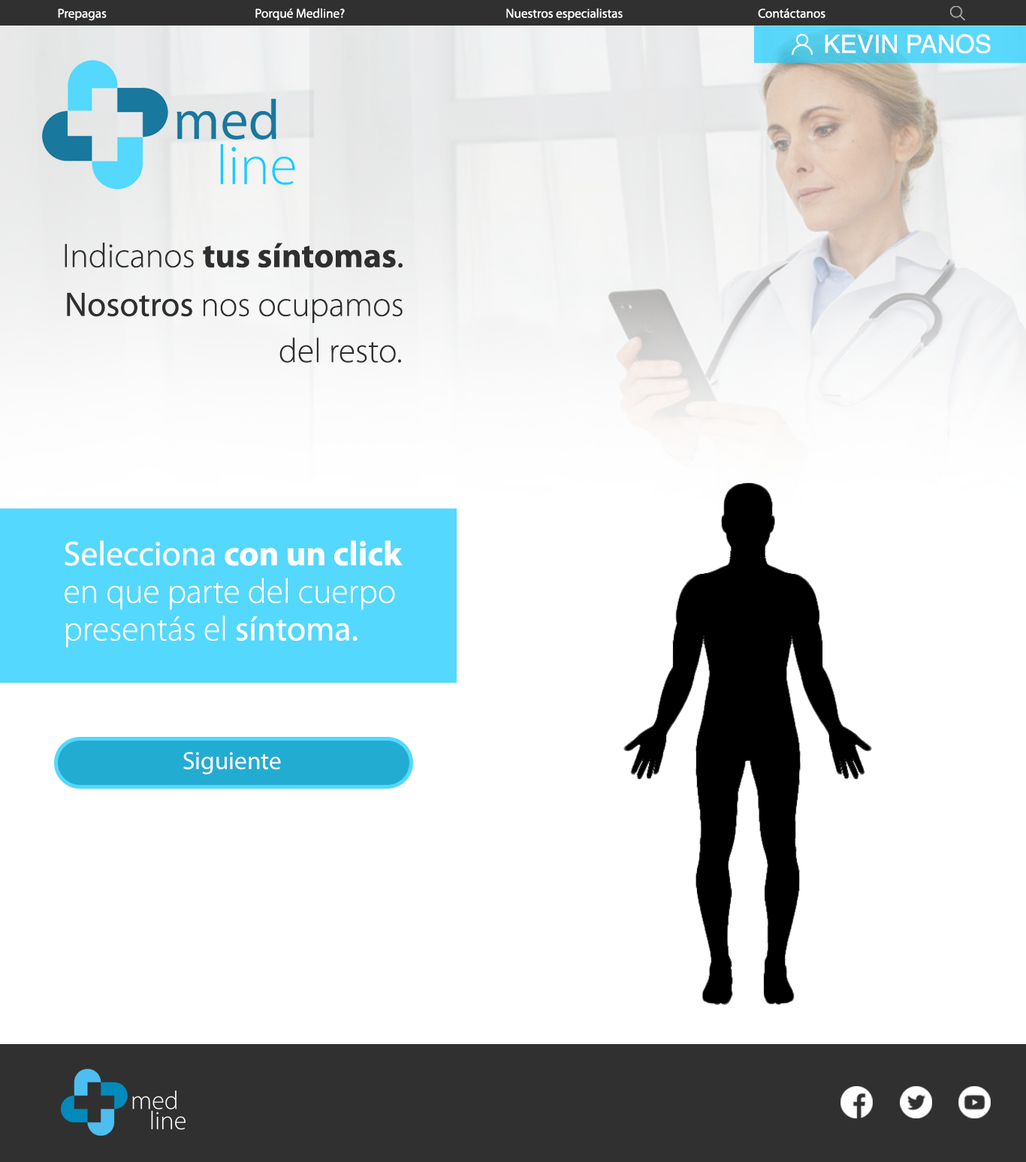
<style>
.page{position:relative;width:1026px;height:1162px;background:#ffffff}
.page>*{position:absolute;margin:0}
.t1{font:12.8px "MyriadPro-Regular";color:#ffffff}
.t2{font:25px "Helvetica";color:#ffffff}
.t3{font:34.4px "MyriadPro-Bold";color:#2f2f2f}
.t4{font:34.4px "MyriadPro-Light";color:#2f2f2f}
.t5{font:34.4px "MyriadPro-Regular";color:#2f2f2f}
.t6{font:34.4px/37.6px "MyriadPro-Light";color:#ffffff}
.t7{font:34.4px/37.6px "MyriadPro-Regular";color:#ffffff}
.t8{font:34.4px/37.6px "MyriadPro-Bold";color:#ffffff}
.t9{font:25px "MyriadPro-Regular";color:#ffffff}
</style>
<div class="page">
<p class="t1" style="left:58px;top:8px;width:49px;height:13px">Prepagas</p>
<p class="t1" style="left:255px;top:8px;width:90px;height:12px">Porqué Medline?</p>
<p class="t1" style="left:506px;top:8px;width:117px;height:12px">Nuestros especialistas</p>
<p class="t1" style="left:758px;top:8px;width:68px;height:10px">Contáctanos</p>
<p class="t2" style="left:825px;top:34px;width:166px;height:19px">KEVIN PANOS</p>
<p class="t3" style="left:65px;top:243px;width:338px;height:25px"><span class="t4">Indicanos </span>tus síntomas<span class="t5">.</span></p>
<p class="t4" style="left:67px;top:292px;width:336px;height:31px"><span class="t5">Nosotros </span>nos ocupamos</p>
<p class="t4" style="left:279px;top:337px;width:122px;height:26px">del resto.</p>
<p class="t6" style="left:65px;top:540px;width:338px;height:108px"><span class="t7">Selecciona </span><span class="t8">con un click<br></span>en que parte del cuerpo <br>presentás el <span class="t7">síntoma.</span></p>
<p class="t9" style="left:183px;top:752px;width:98px;height:22px">Siguiente</p>
</div>
